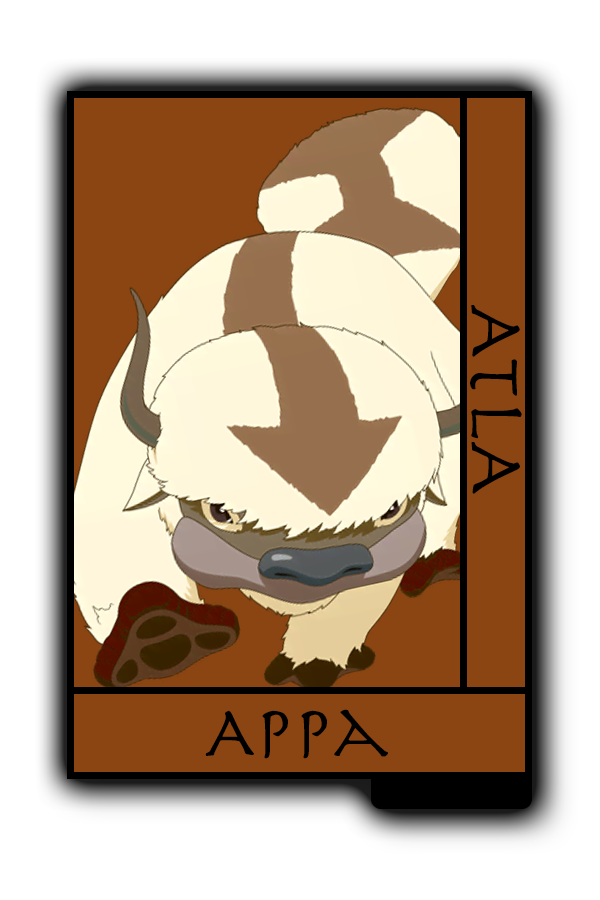
<style>
.page{position:relative;width:600px;height:900px;background:#8a4513}
.page>*{position:absolute;margin:0}
.t1{font:80.7px "Herculanum";color:#000000}
.t2{font:75px "Herculanum";color:#000000}
</style>
<div class="page">
<p class="t1" style="left:470px;top:305px;width:52px;height:189px;rotate:90deg">ATLA</p>
<p class="t2" style="left:205px;top:709px;width:183px;height:50px">Appa</p>
</div>
